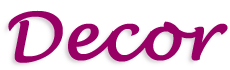
<style>
.page{position:relative;width:230px;height:70px;background:#ffffff}
.page>*{position:absolute;margin:0}
.t1{font:64px "LucidaHandwriting-Italic";color:#990066;font-weight:bold}
</style>
<div class="page">
<p class="t1" style="left:8px;top:10px;width:220px;height:53px">Decor</p>
</div>
